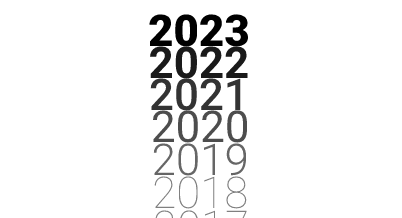
<style>
.page{position:relative;width:402px;height:218px;background:#ffffff}
.page>*{position:absolute;margin:0}
.t1{font:43.9px "Roboto-Black";color:#000000}
.t2{font:43.9px "Roboto-Bold";color:#1a1a1a}
.t3{font:43.9px "Roboto-Medium";color:#333333}
.t4{font:43.9px "Roboto-Regular";color:#4d4d4d}
.t5{font:43.9px "Roboto-Light";color:#666666}
.t6{font:43.9px "Roboto-Thin";color:#808080}
</style>
<div class="page">
<p class="t1" style="left:149px;top:14px;width:100px;height:33px">2023</p>
<p class="t2" style="left:150px;top:46px;width:98px;height:33px">2022</p>
<p class="t3" style="left:150px;top:78px;width:91px;height:33px">2021</p>
<p class="t4" style="left:152px;top:110px;width:96px;height:33px">2020</p>
<p class="t5" style="left:153px;top:143px;width:94px;height:33px">2019</p>
<p class="t6" style="left:154px;top:176px;width:93px;height:33px">2018</p>
</div>
